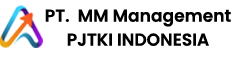
<style>
.page{position:relative;width:236px;height:59px;background:#ffffff}
.page>*{position:absolute;margin:0}
.t1{font:17.2px/24px "Poppins-SemiBold";color:#000000}
</style>
<div class="page">
<p class="t1" style="left:45px;top:9px;width:186px;height:37px;text-align:center">PT.  MM Management<br>PJTKI INDONESIA</p>
</div>
